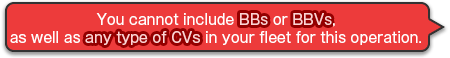
<style>
.page{position:relative;width:450px;height:58px;background:#ed3b3b}
.page>*{position:absolute;margin:0}
.t1{font:14px/18px "GothicMB101Pro-Regular";color:#ffffff}
.t2{font:14px/18px "GothicMB101Pro-Regular";color:#ffd3d3}
</style>
<div class="page">
<p class="t1" style="left:10px;top:13px;width:411px;height:32px;text-align:center">You cannot include <span class="t2">BBs</span> or <span class="t2">BBVs</span>,<br>as well as <span class="t2">any type of CVs</span> in your fleet for this operation.</p>
<p class="t1" style="left:10px;top:13px;width:411px;height:32px;text-align:center">You cannot include <span class="t2">BBs</span> or <span class="t2">BBVs</span>,<br>as well as <span class="t2">any type of CVs</span> in your fleet for this operation.</p>
</div>
